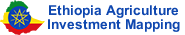
<style>
.page{position:relative;width:185px;height:35px;background:#ffffff}
.page>*{position:absolute;margin:0}
.t1{font:21px "BrowalliaNew-Bold";color:#0f47af}
</style>
<div class="page">
<p class="t1" style="left:49px;top:5px;width:129px;height:13px">Ethiopia Agriculture</p>
<p class="t1" style="left:48px;top:19px;width:132px;height:13px">Investment Mapping</p>
</div>
